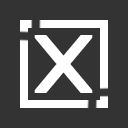
<style>
.page{position:relative;width:128px;height:128px;background:#333333}
.page>*{position:absolute;margin:0}
.t1{font:80px "Orbitron-Bold";color:#ffffff}
</style>
<div class="page">
<p class="t1" style="left:34px;top:35px;width:59px;height:58px">X</p>
</div>
